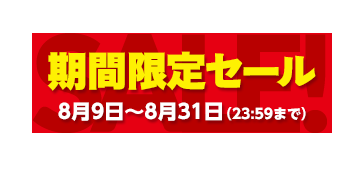
<style>
.page{position:relative;width:364px;height:170px;background:#ffffff}
.page>*{position:absolute;margin:0}
.t1{font:134px "Lato-Black";letter-spacing:-0.11em;color:#b80000}
.t2{font:40px "HiraSansOldStdN-W9";letter-spacing:0.01em;color:#fef102}
.t3{font:20px "UDShinGoNTPro-Heavy";color:#ffffff}
.t4{font:14px "UDShinGoNTPro-Heavy";color:#ffffff}
</style>
<div class="page">
<p class="t1" style="left:32px;top:33px;width:295px;height:100px">SALE!</p>
<p class="t2" style="left:47px;top:51px;width:269px;height:40px">期間限定セール</p>
<p class="t3" style="left:58px;top:102px;width:248px;height:19px">8月9日〜8月31日<span class="t4">（23:59まで）</span></p>
</div>
